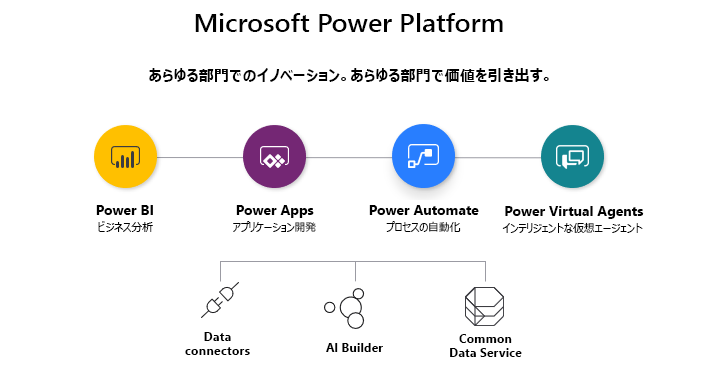
<style>
.page{position:relative;width:708px;height:379px;background:#ffffff}
.page>*{position:absolute;margin:0}
.t1{font:25.5px "SegoeUI-Semibold";color:#000000;scale:1.05 1}
.t2{font:15.3px "MeiryoUI-Bold";color:#000000}
.t3{font:14px "SegoeUI-Bold";color:#000000}
.t4{font:10.7px "MeiryoUI";color:#000000}
.t5{font:12.4px/14.7px "SegoeUI-Bold";color:#000000}
.t6{font:12.4px/14.7px "KozGoPr6N-Regular";color:#000000}
.t7{font:12.4px "SegoeUI-Bold";color:#000000}
</style>
<div class="page">
<p class="t1" style="left:195px;top:13px;width:308px;height:19px">Microsoft Power Platform</p>
<p class="t2" style="left:149px;top:68px;width:400px;height:14px">あらゆる部門でのイノベーション。あらゆる部門で価値を引き出す。</p>
<p class="t3" style="left:96px;top:205px;width:57px;height:10px">Power BI</p>
<p class="t3" style="left:236px;top:205px;width:78px;height:13px">Power Apps</p>
<p class="t3" style="left:369px;top:205px;width:110px;height:10px">Power Automate</p>
<p class="t3" style="left:505px;top:206px;width:139px;height:13px">Power Virtual Agents</p>
<p class="t4" style="left:98px;top:221px;width:55px;height:11px">ビジネス分析</p>
<p class="t4" style="left:233px;top:221px;width:83px;height:11px">アプリケーション開発</p>
<p class="t4" style="left:386px;top:221px;width:75px;height:11px">プロセスの自動化</p>
<p class="t4" style="left:502px;top:222px;width:141px;height:11px">インテリジェントな仮想エージェント</p>
<p class="t5" style="left:185px;top:332px;width:65px;height:23px;text-align:center">Data connectors<br><span class="t6">データ コネクタ</span></p>
<p class="t5" style="left:450px;top:334px;width:72px;height:23px;text-align:center">Common Data Service</p>
<p class="t7" style="left:326px;top:343px;width:57px;height:9px">Al Builder</p>
</div>
